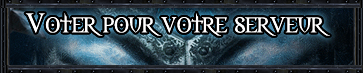
<style>
.page{position:relative;width:363px;height:73px}
.page>*{position:absolute;margin:0}
.t1{font:25px "Morpheus";color:#ffffff;scale:1.1 1}
</style>
<div class="page">
<p class="t1" style="left:25px;top:12px;width:305px;height:24px">Voter pour votre serveur</p>
<p class="t1" style="left:25px;top:12px;width:305px;height:24px">Voter pour votre serveur</p>
</div>
